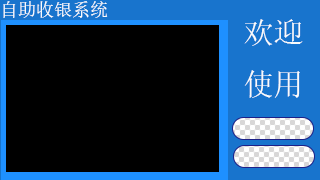
<style>
.page{position:relative;width:320px;height:180px;background:#000000}
.page>*{position:absolute;margin:0}
.t1{font:18px "SimSun";color:#f9fbfc}
.t2{font:30px "SimSun";color:#f9fbfc}
</style>
<div class="page">
<p class="t1" style="left:3px;top:1px;width:105px;height:17px">自助收银系统</p>
<p class="t2" style="left:244px;top:19px;width:59px;height:79px;text-align:center">欢迎<br>使用</p>
</div>
